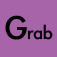
<style>
.page{position:relative;width:57px;height:57px;background:#a864a9}
.page>*{position:absolute;margin:0}
.t1{font:20.8px "LiGothicMed";color:#000000}
.t2{font:37.5px "LiGothicMed";color:#000000}
</style>
<div class="page">
<p class="t1" style="left:5px;top:15px;width:48px;height:25px"><span class="t2">G</span>rab</p>
</div>
